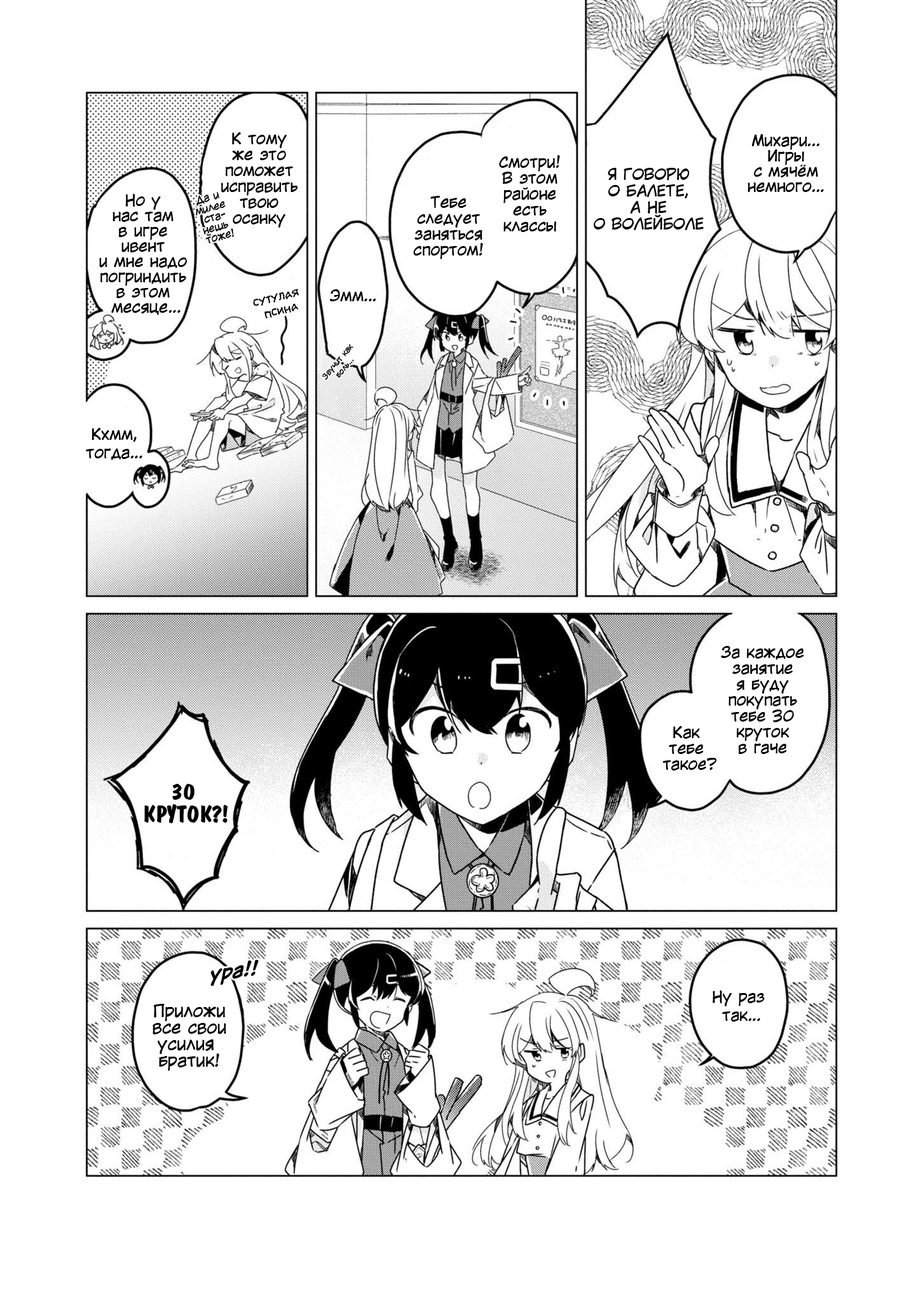
<style>
.page{position:relative;width:916px;height:1302px;background:#ffffff}
.page>*{position:absolute;margin:0}
.t1{font:15.3px/15.9px "KuraiVoice2";color:#000000}
.t2{font:15.3px/15.3px "KuraiVoice2";color:#000000}
.t3{font:15.3px/16.5px "KuraiVoice2";color:#000000}
.t4{font:10.2px/10.2px "KuraiVoice2";color:#000000}
.t5{font:11.4px "el_CCEvilSchemes";color:#000000}
.t6{font:15.3px "KuraiVoice2";color:#000000}
.t7{font:7.6px "KuraiVoice2";color:#000000}
.t8{font:22.9px/22.9px "ADomInoBold";color:#000000}
.t9{font:17.8px "KuraiVoice2-BoldItalic";color:#000000}
.t10{font:16.5px/16.5px "KuraiVoice2";color:#000000}
</style>
<div class="page">
<p class="t1" style="left:221px;top:132px;width:77px;height:96px;text-align:center">К тому<br>же это<br>поможет<br>исправить<br>твою<br>осанку</p>
<p class="t2" style="left:748px;top:134px;width:76px;height:58px;text-align:center">Михари...<br>Игры<br>с мячём<br>немного...</p>
<p class="t1" style="left:499px;top:155px;width:61px;height:77px;text-align:center">Смотри!<br>В этом<br>районе<br>есть<br>классы</p>
<p class="t3" style="left:594px;top:168px;width:110px;height:62px;text-align:center">Я ГОВОРЮ<br>О БАЛЕТЕ,<br>А НЕ<br>О ВОЛЕЙБОЛЕ</p>
<p class="t2" style="left:99px;top:194px;width:88px;height:121px;text-align:center">Но у<br>нас там<br>в игре<br>ивент<br>и мне надо<br>погриндить<br>в этом<br> месяце...</p>
<p class="t4" style="left:196px;top:192px;width:38px;height:51px;text-align:center;rotate:-16deg">Да и <br>милее <br>ста-<br>нешь <br>тоже!</p>
<p class="t1" style="left:413px;top:196px;width:70px;height:63px;text-align:center">Тебе<br>следует<br>заняться<br>спортом!</p>
<p class="t5" style="left:253px;top:289px;width:46px;height:29px;text-align:center;rotate:-14deg">Сутулая <br>псина</p>
<p class="t6" style="left:330px;top:289px;width:46px;height:12px">Эмм...</p>
<p class="t7" style="left:322px;top:344px;width:32px;height:36px;text-align:center;rotate:-50deg">Звучит как<br>боль...</p>
<p class="t6" style="left:86px;top:428px;width:56px;height:32px;text-align:center">Кхмм,<br>тогда...</p>
<p class="t1" style="left:721px;top:646px;width:83px;height:108px;text-align:center">За каждое<br>занятие<br>я буду<br>покупать<br>тебе 30<br>круток<br>в гаче</p>
<p class="t1" style="left:662px;top:726px;width:55px;height:44px;text-align:center">Как<br>тебе<br> такое?</p>
<p class="t8" style="left:144px;top:784px;width:84px;height:39px;text-align:center">30 <br>КРУТОК?!</p>
<p class="t9" style="left:210px;top:959px;width:49px;height:27px;rotate:-9deg">ура!!</p>
<p class="t6" style="left:713px;top:990px;width:52px;height:31px;text-align:center">Ну раз <br>так...</p>
<p class="t10" style="left:153px;top:1004px;width:73px;height:67px;text-align:center">Приложи<br>все свои<br>усилия <br>братик!</p>
</div>
